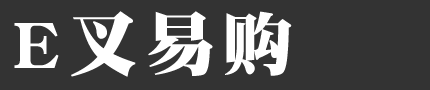
<style>
.page{position:relative;width:430px;height:90px;background:#333333}
.page>*{position:absolute;margin:0}
.t1{font:70px "DFPSongW12";letter-spacing:0.1em;color:#ffffff}
</style>
<div class="page">
<p class="t1" style="left:14px;top:11px;width:278px;height:66px">E叉易购</p>
</div>
